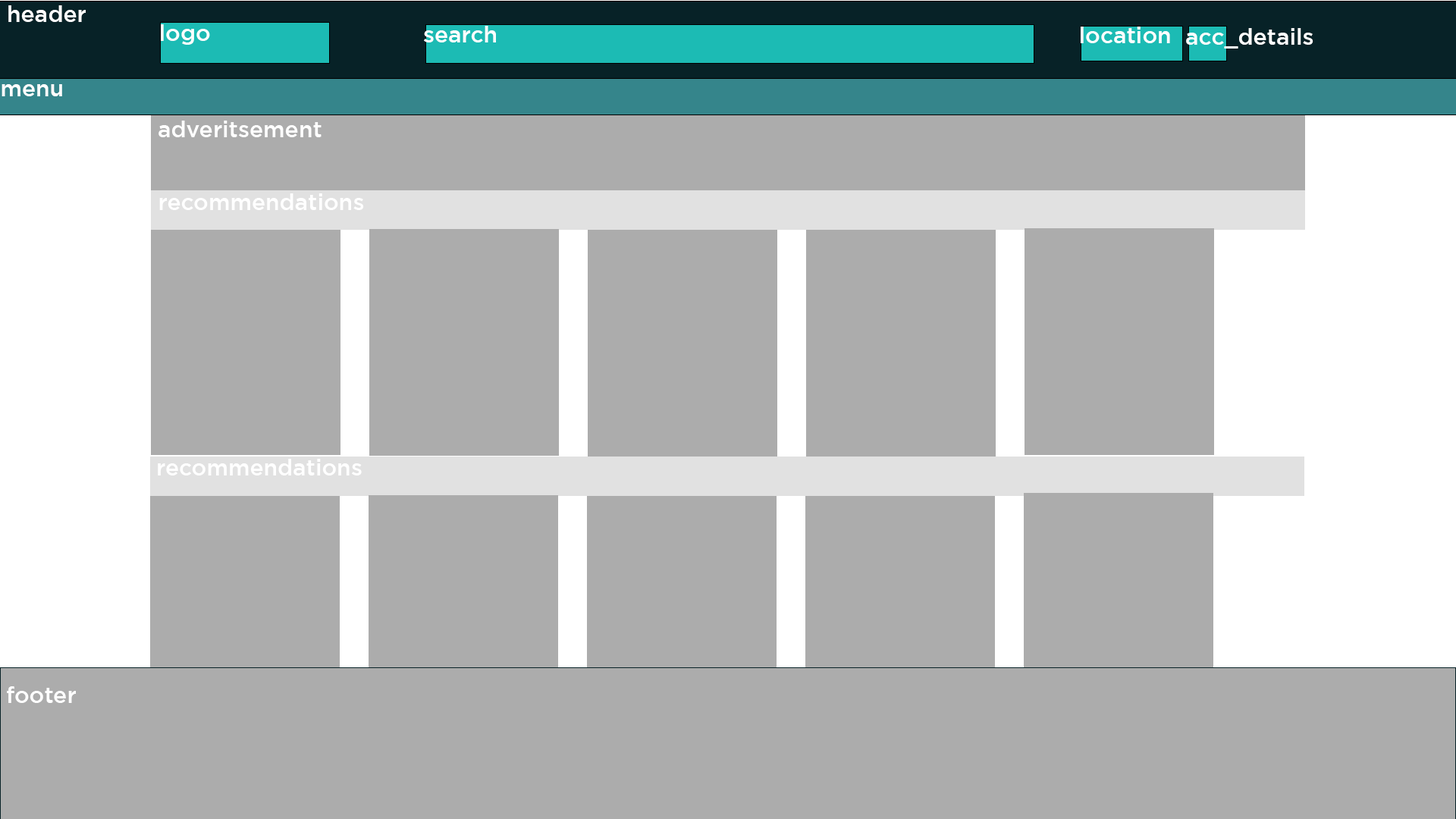
<style>
.page{position:relative;width:1456px;height:819px;background:#acacac}
.page>*{position:absolute;margin:0}
.t1{font:22.7px "Gotham-Medium";color:#ffffff}
</style>
<div class="page">
<p class="t1" style="left:8px;top:5px;width:78px;height:17px">header</p>
<p class="t1" style="left:161px;top:24px;width:49px;height:21px">logo</p>
<p class="t1" style="left:424px;top:26px;width:72px;height:16px">search</p>
<p class="t1" style="left:1081px;top:27px;width:89px;height:16px">location</p>
<p class="t1" style="left:1186px;top:28px;width:127px;height:21px">acc_details</p>
<p class="t1" style="left:2px;top:84px;width:60px;height:12px">menu</p>
<p class="t1" style="left:158px;top:121px;width:164px;height:16px">adveritsement</p>
<p class="t1" style="left:159px;top:193px;width:205px;height:17px">recommendations</p>
<p class="t1" style="left:158px;top:459px;width:204px;height:16px">recommendations</p>
<p class="t1" style="left:7px;top:686px;width:69px;height:17px">footer</p>
</div>
